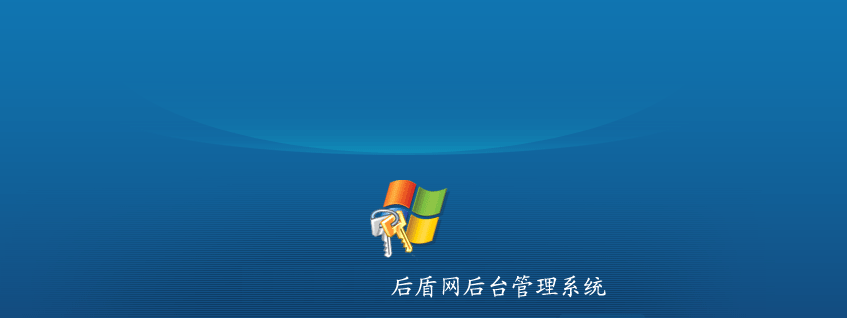
<style>
.page{position:relative;width:847px;height:318px}
.page>*{position:absolute;margin:0}
.t1{font:24px "KaiTi_GB2312";color:#ffffff}
</style>
<div class="page">
<p class="t1" style="left:391px;top:275px;width:215px;height:24px">后盾网后台管理系统</p>
</div>
